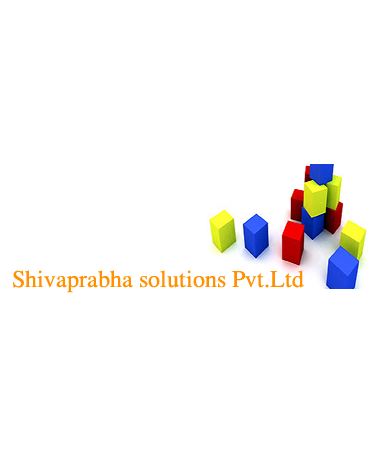
<style>
.page{position:relative;width:368px;height:450px;background:#ffffff}
.page>*{position:absolute;margin:0}
.t1{font:24px "Romantic";color:#ff9000}
</style>
<div class="page">
<p class="t1" style="left:13px;top:270px;width:291px;height:23px">Shivaprabha solutions Pvt.Ltd</p>
</div>
